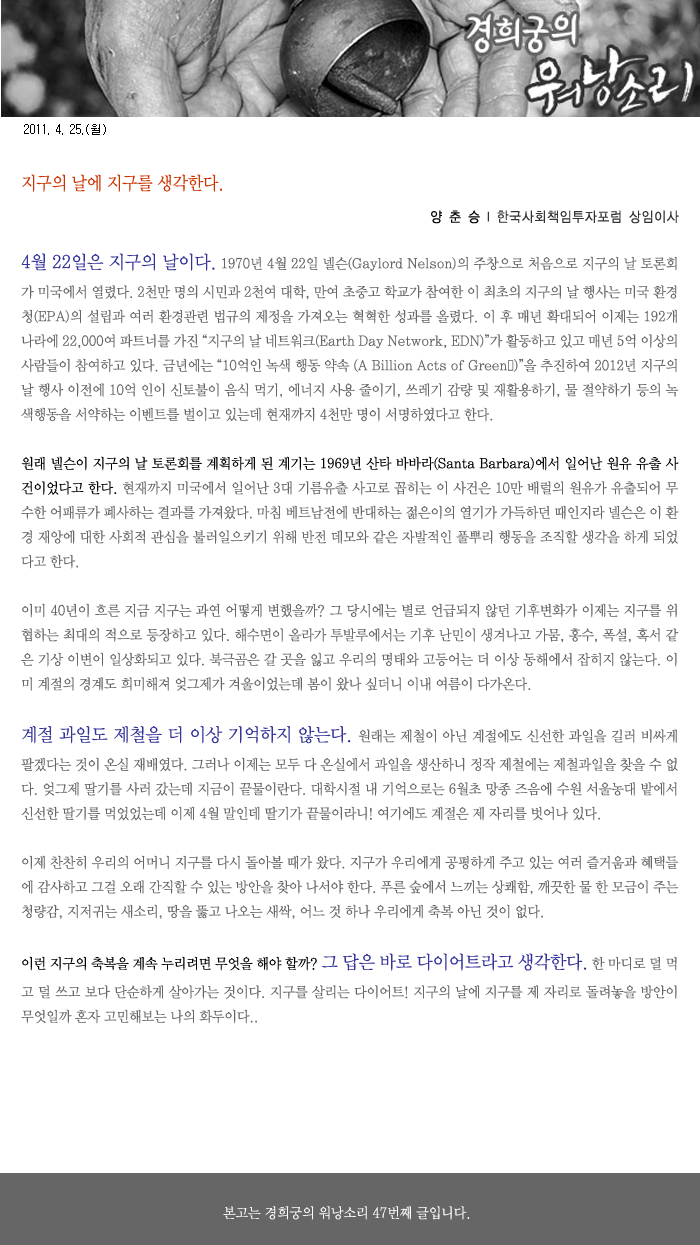
<style>
.page{position:relative;width:700px;height:1245px;background:#ffffff}
.page>*{position:absolute;margin:0}
.t1{font:12px "Gulim";color:#000000}
.t2{font:18px "YDIWebBatan";color:#cc3300;scale:0.9 1}
.t3{font:14px "YDIYGO120-KSCpc-EUC-H";color:#333333;scale:0.9 1}
.t4{font:14px "YDIYGO120-KSCpc-EUC-H";color:#000000;scale:0.9 1}
.t5{font:14px "YDIWebBatan";color:#666666;scale:0.95 1}
.t6{font:18px "YDIWebBatan";color:#333399;scale:0.95 1}
.t7{font:14px "YDIWebBatan";color:#000000;scale:0.95 1}
.t8{font:14px "YDIWebBatan";color:#ffffff;scale:0.95 1}
</style>
<div class="page">
<p class="t1" style="left:24px;top:124px;width:82px;height:11px">2011. 4. 25.(월)</p>
<p class="t2" style="left:22px;top:174px;width:200px;height:18px">지구의 날에 지구를 생각한다.</p>
<p class="t3" style="left:431px;top:210px;width:248px;height:14px"><span class="t4">양 춘 승 </span>l 한국사회책임투자포럼 상임이사</p>
<p class="t5" style="left:21px;top:253px;width:658px;height:771px;text-align:justify"><span class="t6">4월 22일은 지구의 날이다.</span> 1970년 4월 22일 넬슨(Gaylord Nelson)의 주창으로 처음으로 지구의 날 토론회가 미국에서 열렸다. 2천만 명의 시민과 2천여 대학, 만여 초중고 학교가 참여한 이 최초의 지구의 날 행사는 미국 환경청(EPA)의 설립과 여러 환경관련 법규의 제정을 가져오는 혁혁한 성과를 올렸다. 이 후 매년 확대되어 이제는 192개 나라에 22,000여 파트너를 가진 “지구의 날 네트워크(Earth Day Network, EDN)”가 활동하고 있고 매년 5억 이상의 사람들이 참여하고 있다. 금년에는 “10억인 녹색 행동 약속 (A Billion Acts of Green®)”을 추진하여 2012년 지구의 날 행사 이전에 10억 인이 신토불이 음식 먹기, 에너지 사용 줄이기, 쓰레기 감량 및 재활용하기, 물 절약하기 등의 녹색행동을 서약하는 이벤트를 벌이고 있는데 현재까지 4천만 명이 서명하였다고 한다.<br><br><span class="t7">원래 넬슨이 지구의 날 토론회를 계획하게 된 계기는 1969년 산타 바바라(Santa Barbara)에서 일어난 원유 유출 사건이었다고 한다. </span>현재까지 미국에서 일어난 3대 기름유출 사고로 꼽히는 이 사건은 10만 배럴의 원유가 유출되어 무수한 어패류가 폐사하는 결과를 가져왔다. 마침 베트남전에 반대하는 젊은이의 열기가 가득하던 때인지라 넬슨은 이 환경 재앙에 대한 사회적 관심을 불러일으키기 위해 반전 데모와 같은 자발적인 풀뿌리 행동을 조직할 생각을 하게 되었다고 한다.<br><br>이미 40년이 흐른 지금 지구는 과연 어떻게 변했을까? 그 당시에는 별로 언급되지 않던 기후변화가 이제는 지구를 위협하는 최대의 적으로 등장하고 있다. 해수면이 올라가 투발루에서는 기후 난민이 생겨나고 가뭄, 홍수, 폭설, 혹서 같은 기상 이변이 일상화되고 있다. 북극곰은 갈 곳을 잃고 우리의 명태와 고등어는 더 이상 동해에서 잡히지 않는다. 이미 계절의 경계도 희미해져 엊그제가 겨울이었는데 봄이 왔나 싶더니 이내 여름이 다가온다. <br><br><span class="t6">계절 과일도 제철을 더 이상 기억하지 않는다. </span>원래는 제철이 아닌 계절에도 신선한 과일을 길러 비싸게 팔겠다는 것이 온실 재배였다. 그러나 이제는 모두 다 온실에서 과일을 생산하니 정작 제철에는 제철과일을 찾을 수 없다. 엊그제 딸기를 사러 갔는데 지금이 끝물이란다. 대학시절 내 기억으로는 6월초 망종 즈음에 수원 서울농대 밭에서 신선한 딸기를 먹었었는데 이제 4월 말인데 딸기가 끝물이라니! 여기에도 계절은 제 자리를 벗어나 있다.<br><br>이제 찬찬히 우리의 어머니 지구를 다시 돌아볼 때가 왔다. 지구가 우리에게 공평하게 주고 있는 여러 즐거움과 혜택들에 감사하고 그걸 오래 간직할 수 있는 방안을 찾아 나서야 한다. 푸른 숲에서 느끼는 상쾌함, 깨끗한 물 한 모금이 주는 청량감, 지저귀는 새소리, 땅을 뚫고 나오는 새싹, 어느 것 하나 우리에게 축복 아닌 것이 없다. <br><br><span class="t7">이런 지구의 축복을 계속 누리려면 무엇을 해야 할까? </span><span class="t6">그 답은 바로 다이어트라고 생각한다.</span> 한 마디로 덜 먹고 덜 쓰고 보다 단순하게 살아가는 것이다. 지구를 살리는 다이어트! 지구의 날에 지구를 제 자리로 돌려놓을 방안이 무엇일까 혼자 고민해보는 나의 화두이다..</p>
<p class="t8" style="left:223px;top:1206px;width:247px;height:14px">본고는 경희궁의 워낭소리 47번째 글입니다.</p>
</div>
